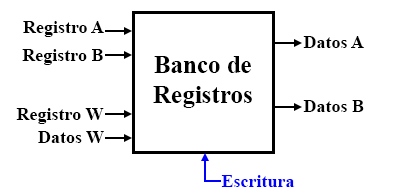
<style>
.page{position:relative;width:406px;height:194px;background:#ffffff}
.page>*{position:absolute;margin:0}
.t1{font:18px "TimesNewRomanPS-BoldMT";color:#000000}
.t2{font:25px "TimesNewRomanPS-BoldMT";color:#000000}
.t3{font:18px "TimesNewRomanPS-BoldMT";color:#0000ff}
</style>
<div class="page">
<p class="t1" style="left:23px;top:21px;width:81px;height:16px">Registro A</p>
<p class="t1" style="left:303px;top:36px;width:61px;height:12px">Datos A</p>
<p class="t1" style="left:22px;top:49px;width:81px;height:16px">Registro B</p>
<p class="t2" style="left:153px;top:56px;width:99px;height:52px;text-align:center">Banco de<br>Registros</p>
<p class="t1" style="left:303px;top:100px;width:61px;height:12px">Datos B</p>
<p class="t1" style="left:16px;top:108px;width:88px;height:16px">Registro W</p>
<p class="t1" style="left:38px;top:131px;width:66px;height:12px">Datos W</p>
<p class="t3" style="left:221px;top:175px;width:74px;height:12px">Escritura</p>
</div>
